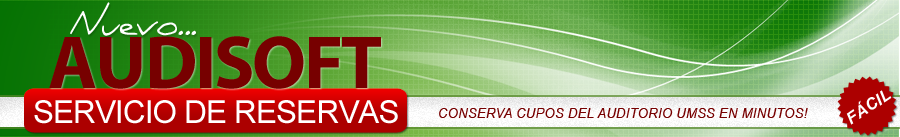
<style>
.page{position:relative;width:900px;height:137px}
.page>*{position:absolute;margin:0}
.t1{font:37.1px "Daniel";letter-spacing:-0.03em;color:#fefefe}
.t2{font:75.6px "MyriadPro-Bold";letter-spacing:-0.03em;color:#770000;text-transform:uppercase}
.t3{font:31.8px "ArialMT";letter-spacing:-0.03em;color:#ffffff;text-transform:uppercase}
.t4{font:16.3px "Arial-BoldItalicMT";letter-spacing:0.025em;color:#fefefe;text-transform:uppercase}
.t5{font:13px "Arial-ItalicMT";letter-spacing:0.025em;color:#770000;text-transform:uppercase}
</style>
<div class="page">
<p class="t1" style="left:70px;top:2px;width:126px;height:34px">Nuevo...</p>
<p class="t2" style="left:49px;top:36px;width:332px;height:53px">AUDISOFT</p>
<p class="t3" style="left:34px;top:100px;width:364px;height:24px">SERVICIO DE RESERVAS</p>
<p class="t4" style="left:846px;top:90px;width:46px;height:35px;rotate:-34deg">FÁcil</p>
<p class="t5" style="left:439px;top:108px;width:369px;height:10px">conserva cupoS DEL AUDITORIO UMSS EN MINUTOS!</p>
</div>
